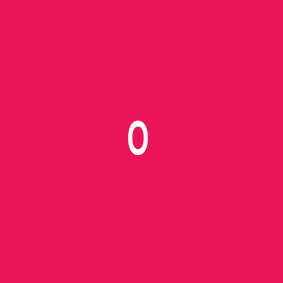
<style>
.page{position:relative;width:283px;height:283px;background:#eb1458}
.page>*{position:absolute;margin:0}
.t1{font:46.2px "Arial-BoldMT";color:#ffffff;scale:0.61 1}
</style>
<div class="page">
<p class="t1" style="left:128px;top:120px;width:20px;height:35px">O</p>
</div>
